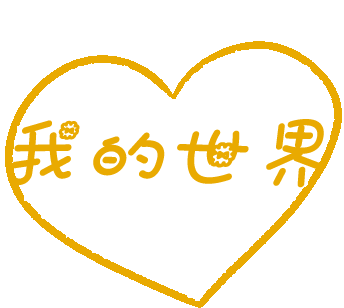
<style>
.page{position:relative;width:344px;height:308px;background:#ffffff}
.page>*{position:absolute;margin:0}
.t1{font:72px "HYLeMiaoTiJ";letter-spacing:0.025em;color:#e9aa01;font-weight:bold;font-style:italic}
</style>
<div class="page">
<p class="t1" style="left:9px;top:119px;width:315px;height:69px">我的世界</p>
</div>
